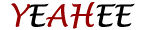
<style>
.page{position:relative;width:150px;height:30px;background:#ffffff}
.page>*{position:absolute;margin:0}
.t1{font:30px "LucidaHandwriting-Italic";color:#980000}
.t2{font:30px "LucidaHandwriting-Italic";color:#000000}
</style>
<div class="page">
<p class="t1" style="left:11px;top:2px;width:124px;height:27px">Y<span class="t2">E</span>AH<span class="t2">EE</span></p>
</div>
